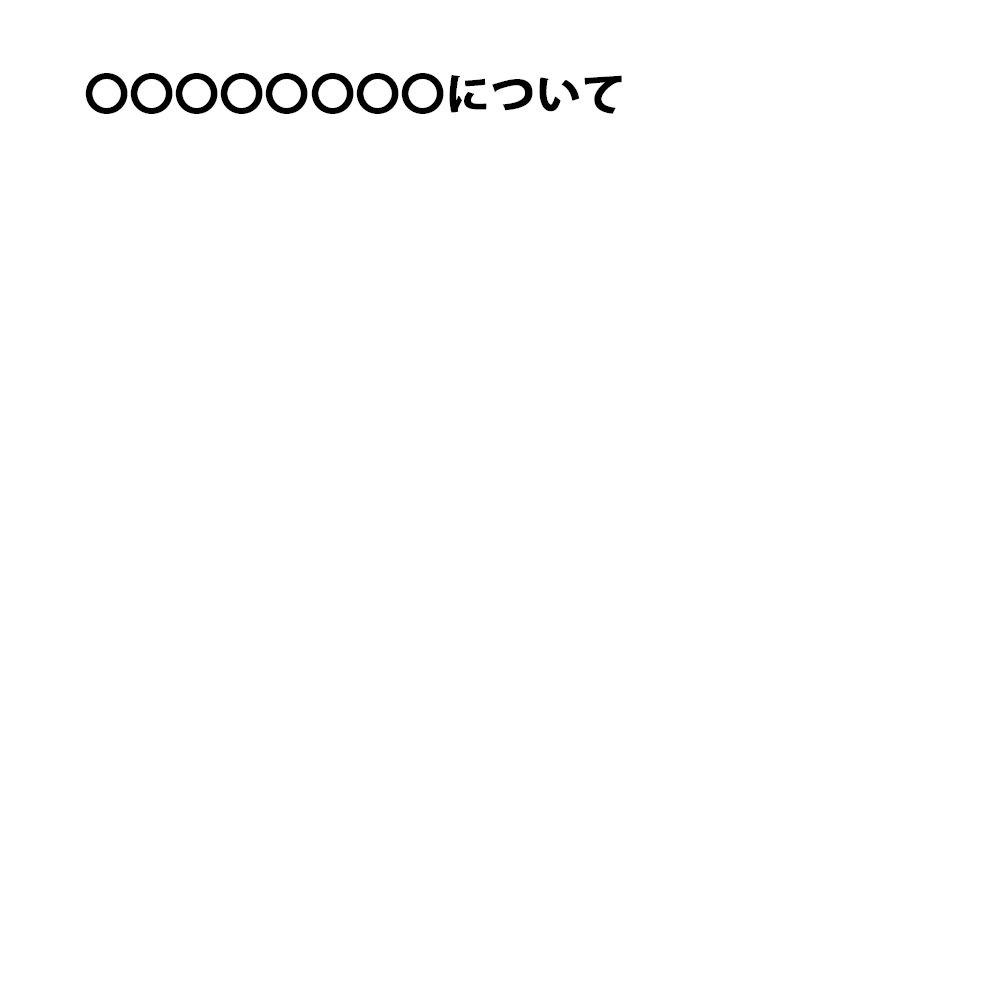
<style>
.page{position:relative;width:1000px;height:1000px;background:#ffffff}
.page>*{position:absolute;margin:0}
.t1{font:44px "KozGoPr6N-Bold";color:#000000;font-weight:bold}
</style>
<div class="page">
<p class="t1" style="left:85px;top:73px;width:537px;height:41px">〇〇〇〇〇〇〇〇について</p>
</div>
